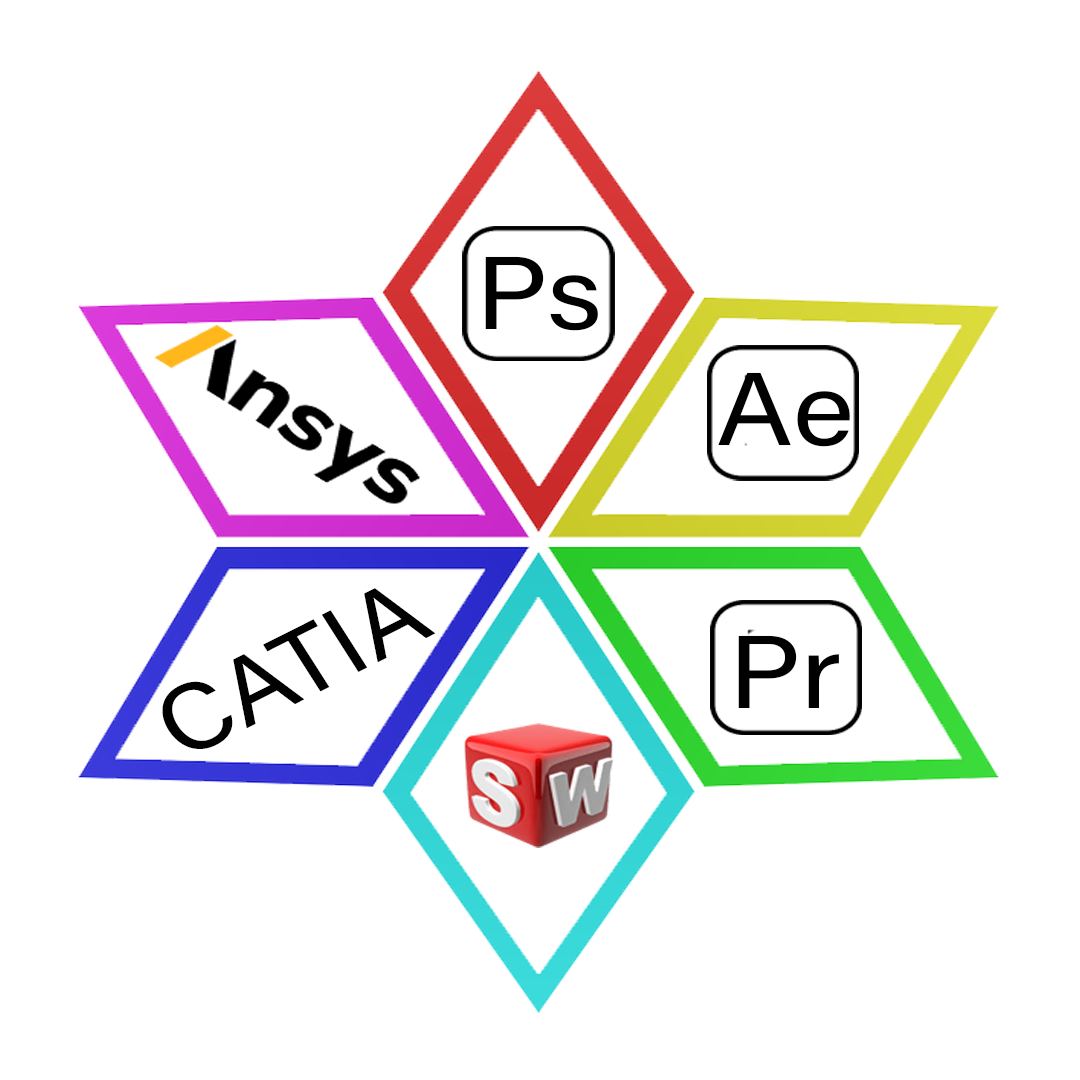
<style>
.page{position:relative;width:1080px;height:1080px;background:#ffffff}
.page>*{position:absolute;margin:0}
.t1{font:103.5px "AcuminConcept-Regular";color:#010101;scale:1.13 1}
.t2{font:97.1px "AcuminConcept-Regular";color:#010101;scale:1.06 1}
</style>
<div class="page">
<p class="t1" style="left:485px;top:256px;width:113px;height:75px">Ps</p>
<p class="t1" style="left:718px;top:372px;width:132px;height:75px">Ae</p>
<p class="t2" style="left:162px;top:588px;width:274px;height:161px;rotate:-27deg">CATIA</p>
<p class="t1" style="left:738px;top:635px;width:101px;height:73px">Pr</p>
</div>
